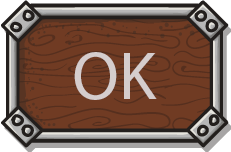
<style>
.page{position:relative;width:231px;height:152px;background:#703b23}
.page>*{position:absolute;margin:0}
.t1{font:68px "MyriadPro-Regular";color:#d5cdcd}
</style>
<div class="page">
<p class="t1" style="left:74px;top:52px;width:83px;height:48px">OK</p>
</div>
